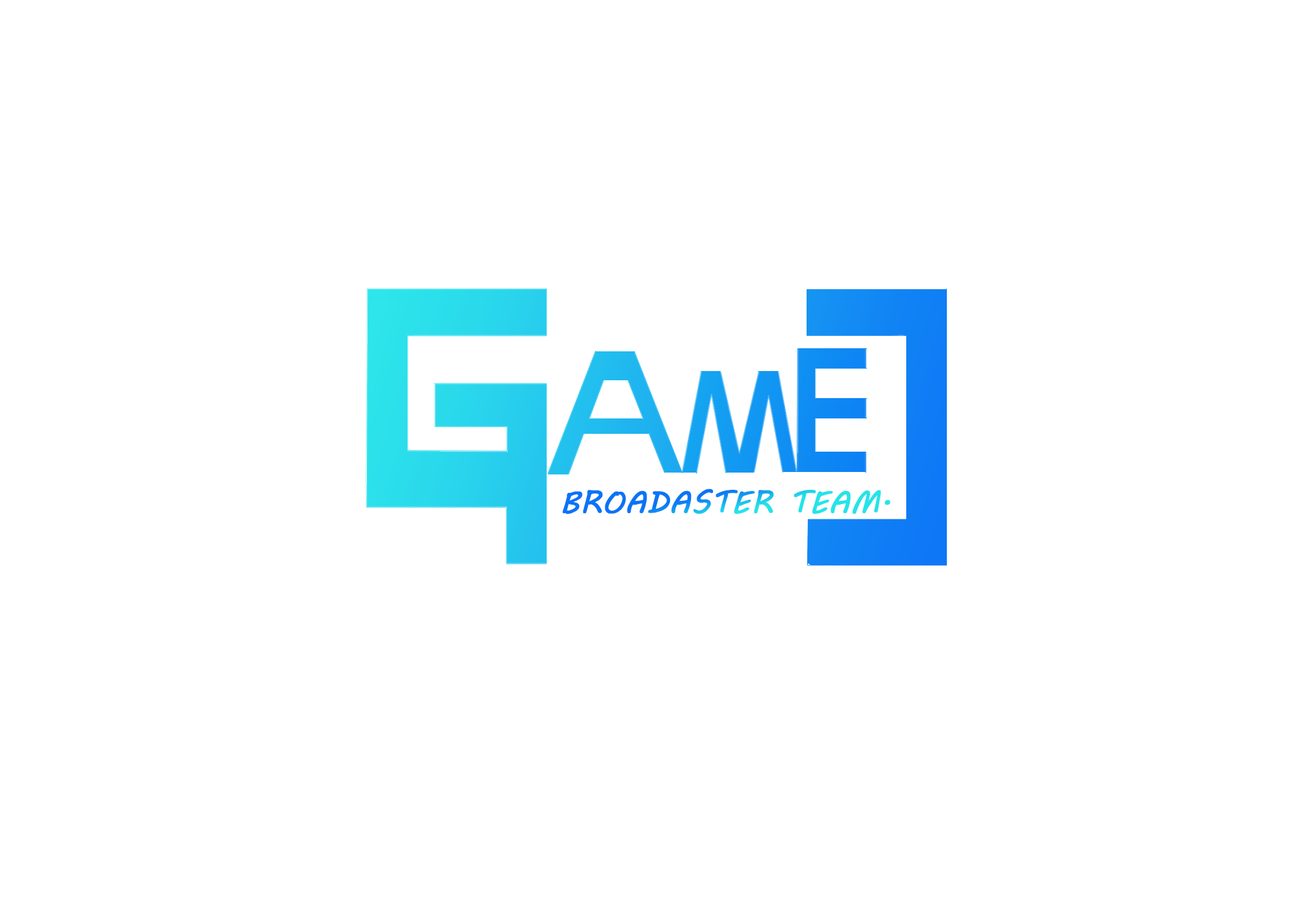
<style>
.page{position:relative;width:1292px;height:923px;background:#ffffff}
.page>*{position:absolute;margin:0}
.t1{font:30.8px "MVBoli";font-weight:bold}
</style>
<div class="page">
<p class="t1" style="left:562px;top:489px;width:328px;height:25px">BROADASTER TEAM.</p>
</div>
